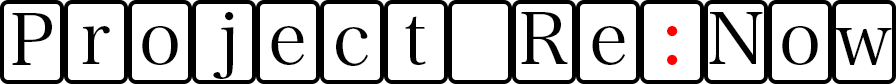
<style>
.page{position:relative;width:896px;height:84px;background:#ffffff}
.page>*{position:absolute;margin:0}
.t1{font:72px "HiraMinPro-W3";color:#000000}
.t2{font:72px "HiraMinPro-W3";color:#ff0000}
</style>
<div class="page">
<p class="t1" style="left:12px;top:13px;width:40px;height:52px">P</p>
<p class="t1" style="left:213px;top:12px;width:21px;height:67px">j</p>
<p class="t1" style="left:405px;top:16px;width:21px;height:49px">t</p>
<p class="t1" style="left:521px;top:12px;width:47px;height:52px">R</p>
<p class="t1" style="left:709px;top:12px;width:54px;height:52px">N</p>
<p class="t1" style="left:82px;top:26px;width:28px;height:38px">r</p>
<p class="t1" style="left:142px;top:26px;width:36px;height:39px">o</p>
<p class="t1" style="left:271px;top:26px;width:33px;height:39px">e</p>
<p class="t1" style="left:336px;top:27px;width:32px;height:39px">c</p>
<p class="t1" style="left:592px;top:26px;width:33px;height:39px">e</p>
<p class="t2" style="left:667px;top:26px;width:11px;height:39px">:</p>
<p class="t1" style="left:782px;top:26px;width:36px;height:39px">o</p>
<p class="t1" style="left:835px;top:28px;width:57px;height:37px">w</p>
</div>
